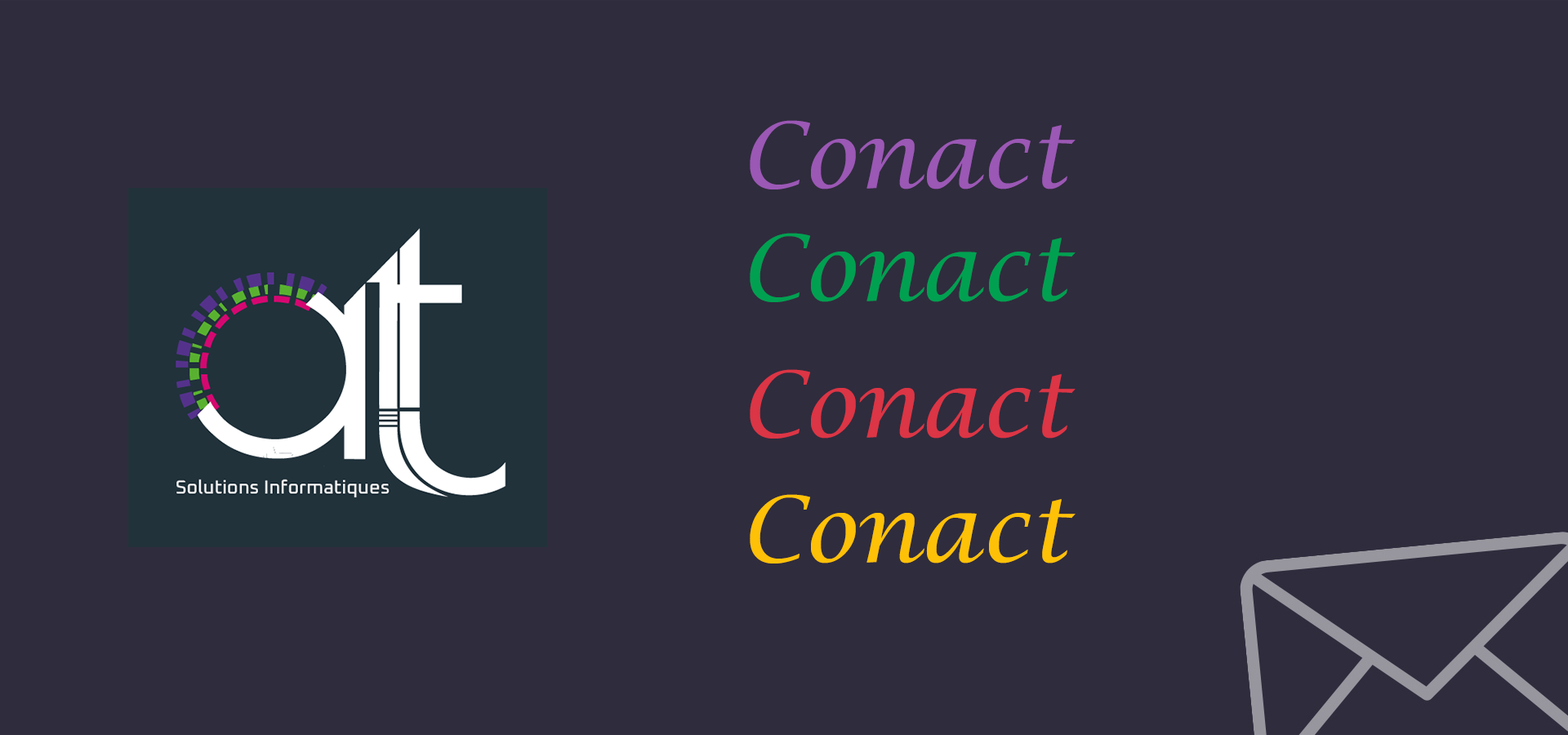
<style>
.page{position:relative;width:1568px;height:735px;background:#2f2c3d}
.page>*{position:absolute;margin:0}
.t1{font:90.6px "LucidaCalligraphy-Italic";color:#9b58b5}
.t2{font:90.6px "LucidaCalligraphy-Italic";color:#00a051}
.t3{font:90.6px "LucidaCalligraphy-Italic";color:#dc3545}
.t4{font:90.6px "LucidaCalligraphy-Italic";color:#ffc107}
</style>
<div class="page">
<p class="t1" style="left:750px;top:120px;width:326px;height:69px">Conact</p>
<p class="t2" style="left:750px;top:233px;width:326px;height:69px">Conact</p>
<p class="t3" style="left:750px;top:369px;width:326px;height:70px">Conact</p>
<p class="t4" style="left:750px;top:494px;width:326px;height:70px">Conact</p>
</div>
